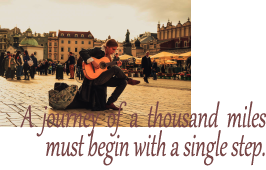
<style>
.page{position:relative;width:266px;height:170px;background:#ffffff}
.page>*{position:absolute;margin:0}
.t1{font:38.4px/28.8px "Gabriola";color:#784646;font-style:italic;scale:0.64 1}
</style>
<div class="page">
<p class="t1" style="left:20px;top:101px;width:246px;height:65px;text-align:right">A  journey  of  a  thousand  miles<br> must begin with a single step.</p>
</div>
